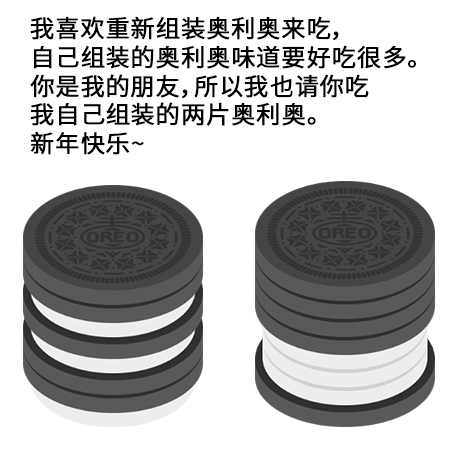
<style>
.page{position:relative;width:450px;height:450px;background:#ffffff}
.page>*{position:absolute;margin:0}
.t1{font:24px "NotoSansCJKsc-DemiLight";letter-spacing:0.02em;color:#000000;font-weight:bold}
</style>
<div class="page">
<p class="t1" style="left:30px;top:16px;width:386px;height:139px">我喜欢重新组装奥利奥来吃，<br>自己组装的奥利奥味道要好吃很多。<br>你是我的朋友，所以我也请你吃<br>我自己组装的两片奥利奥。<br>新年快乐~</p>
</div>
